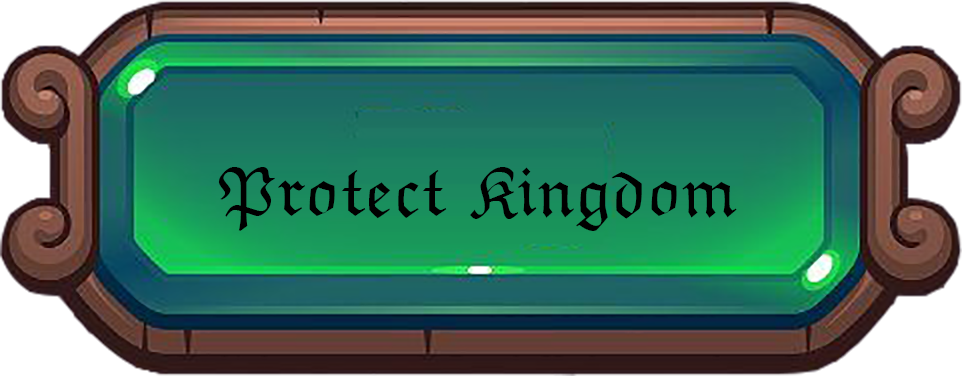
<style>
.page{position:relative;width:962px;height:376px}
.page>*{position:absolute;margin:0}
.t1{font:72px "EuclidFraktur";color:#000000}
</style>
<div class="page">
<p class="t1" style="left:218px;top:167px;width:519px;height:64px">Protect Kingdom</p>
</div>
